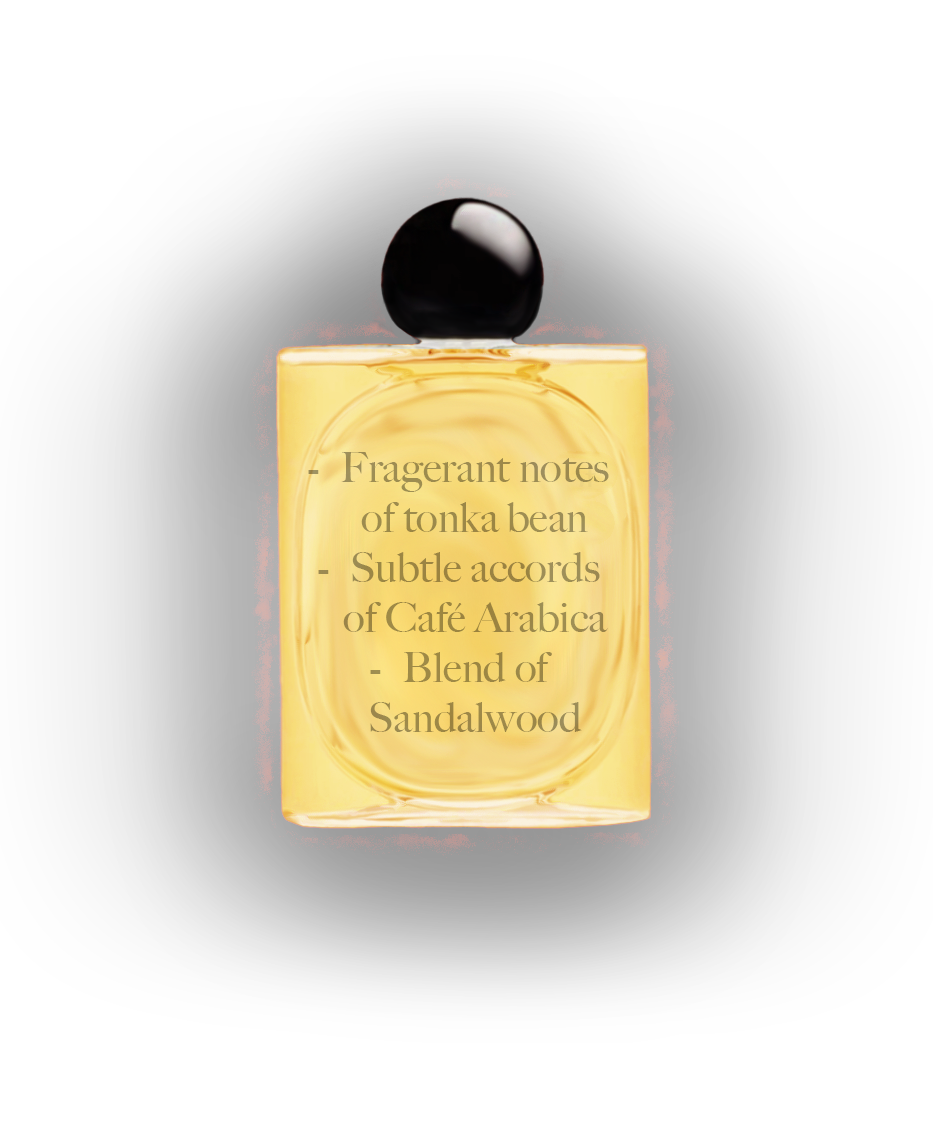
<style>
.page{position:relative;width:933px;height:1134px;background:#ffffff}
.page>*{position:absolute;margin:0}
.t1{font:41.7px "BigCaslon-Medium";color:#9c894a}
</style>
<div class="page">
<p class="t1" style="left:308px;top:452px;width:301px;height:280px;text-align:center">Fragerant notes of tonka bean<br>Subtle accords of Café Arabica<br>Blend of Sandalwood</p>
</div>
